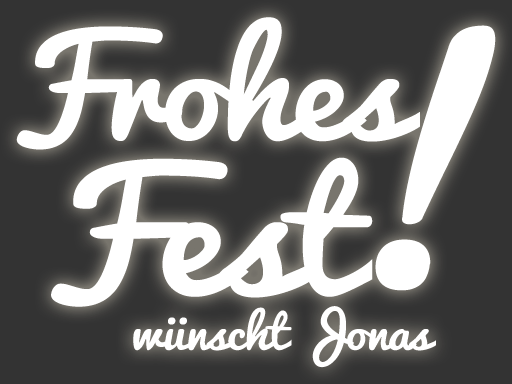
<style>
.page{position:relative;width:512px;height:384px;background:#333333}
.page>*{position:absolute;margin:0}
.t1{font:132.1px "Pacifico-Regular";letter-spacing:-0.025em;color:#ffffff;scale:1.11 1}
.t2{font:291.6px "Pacifico-Regular";letter-spacing:-0.025em;color:#ffffff;scale:1.11 1}
.t3{font:158.8px "Pacifico-Regular";letter-spacing:-0.025em;color:#ffffff;scale:1.12 1}
.t4{font:45.5px "Pacifico-Regular";letter-spacing:-0.025em;color:#ffffff;scale:1.11 1}
</style>
<div class="page">
<p class="t1" style="left:16px;top:17px;width:404px;height:133px">Frohes</p>
<p class="t2" style="left:375px;top:25px;width:121px;height:266px">!</p>
<p class="t3" style="left:51px;top:157px;width:322px;height:150px">Fest</p>
<p class="t4" style="left:133px;top:306px;width:303px;height:62px">wünscht Jonas</p>
</div>
